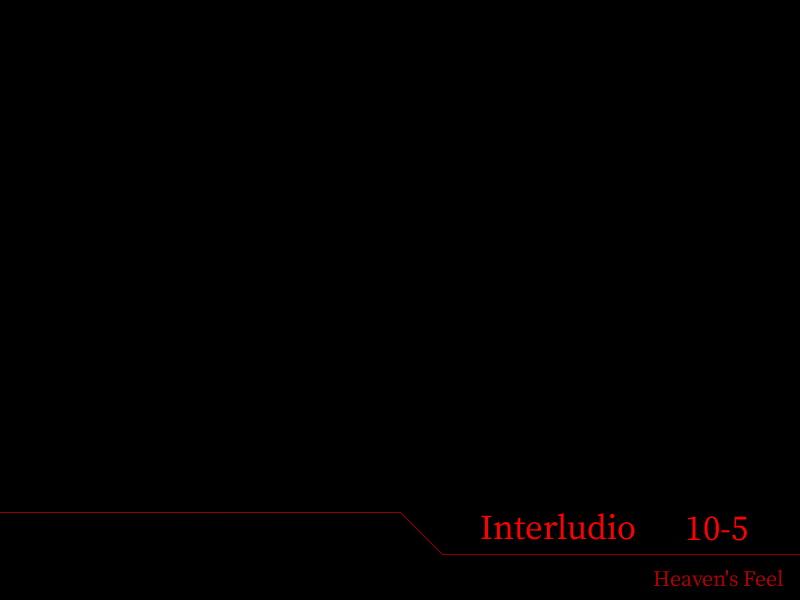
<style>
.page{position:relative;width:800px;height:600px;background:#000000}
.page>*{position:absolute;margin:0}
.t1{font:38px "OfficialFateFont-Medium";color:#ff0000}
.t2{font:24px "OfficialFateFont-Medium";color:#b20000}
</style>
<div class="page">
<p class="t1" style="left:481px;top:513px;width:154px;height:27px">Interludio</p>
<p class="t1" style="left:687px;top:516px;width:60px;height:25px">10-5</p>
<p class="t2" style="left:653px;top:569px;width:130px;height:18px">Heaven's Feel</p>
</div>
